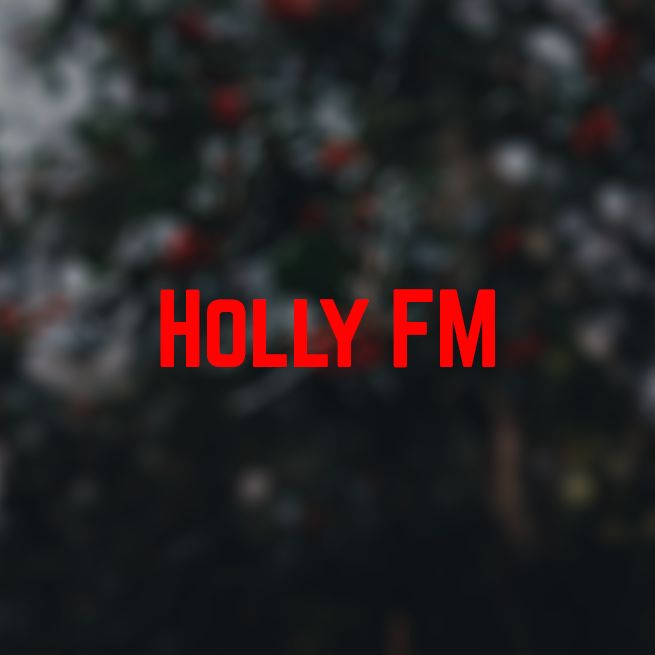
<style>
.page{position:relative;width:655px;height:655px}
.page>*{position:absolute;margin:0}
.t1{font:96.8px "Norwester-Regular";letter-spacing:-0.025em;color:#ff0202}
</style>
<div class="page">
<p class="t1" style="left:160px;top:289px;width:335px;height:79px">Holly FM</p>
</div>
